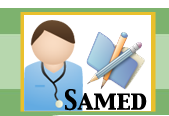
<style>
.page{position:relative;width:169px;height:116px;background:#ffffff}
.page>*{position:absolute;margin:0}
.t1{font:24px "CapitalsRegular";color:#000000}
</style>
<div class="page">
<p class="t1" style="left:65px;top:89px;width:82px;height:22px">Samed</p>
</div>
